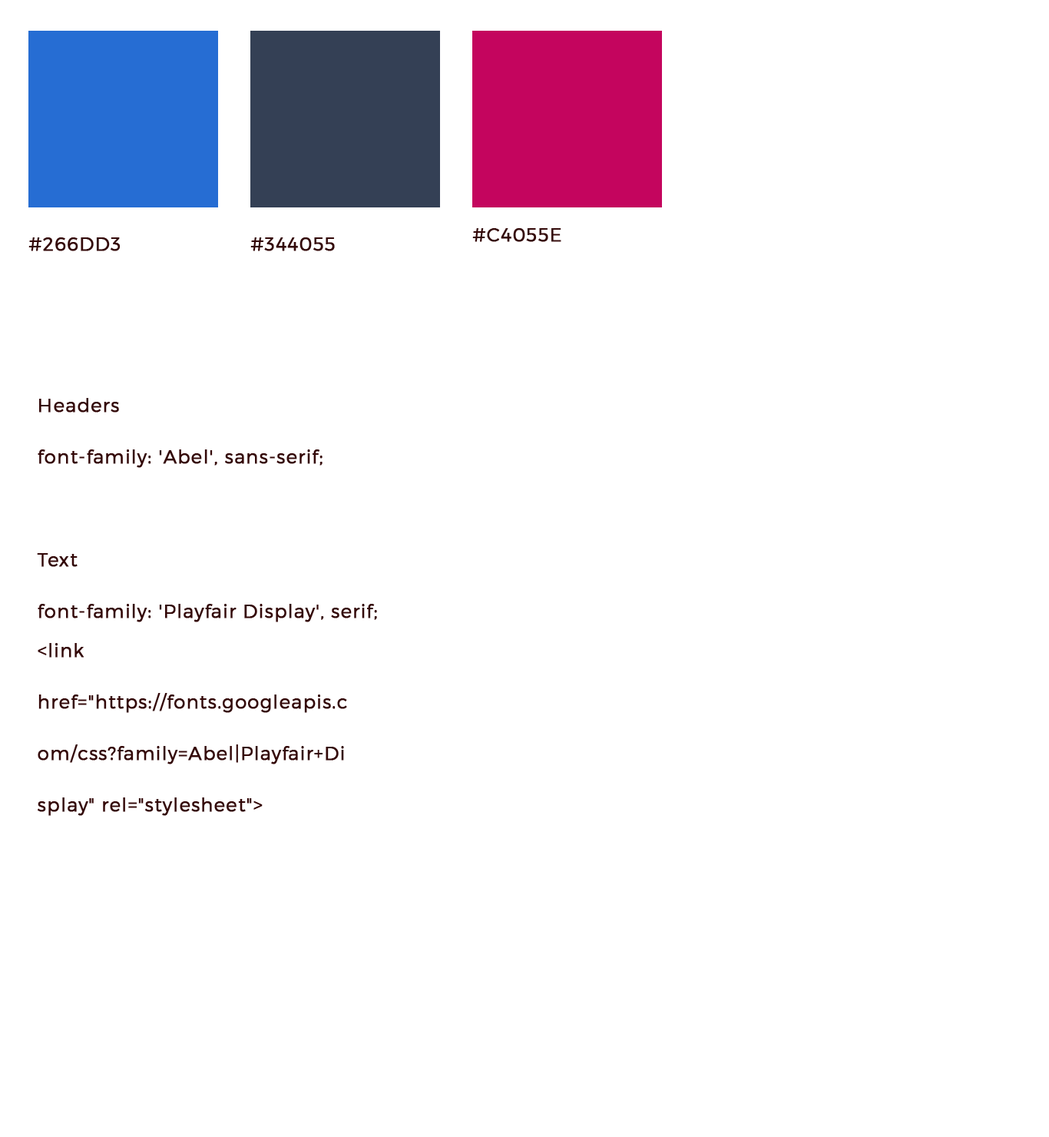
<style>
.page{position:relative;width:1049px;height:1137px;background:#ffffff}
.page>*{position:absolute;margin:0}
.t1{font:18.4px "Montserrat-Light";letter-spacing:0.02em;color:#330808;font-weight:bold}
.t2{font:18.4px/51.5px "Montserrat-Light";letter-spacing:0.02em;color:#330808;font-weight:bold}
</style>
<div class="page">
<p class="t1" style="left:472px;top:228px;width:89px;height:14px">#C4055E</p>
<p class="t1" style="left:28px;top:237px;width:93px;height:14px">#266DD3</p>
<p class="t1" style="left:250px;top:237px;width:85px;height:14px">#344055</p>
<p class="t2" style="left:37px;top:398px;width:340px;height:224px">Headers<br>font-family: 'Abel', sans-serif;<br><br>Text <br>font-family: 'Playfair Display', serif;</p>
<p class="t2" style="left:38px;top:643px;width:309px;height:173px">&lt;link href="https://fonts.googleapis.com/css?family=Abel|Playfair+Display" rel="stylesheet"&gt;</p>
</div>
